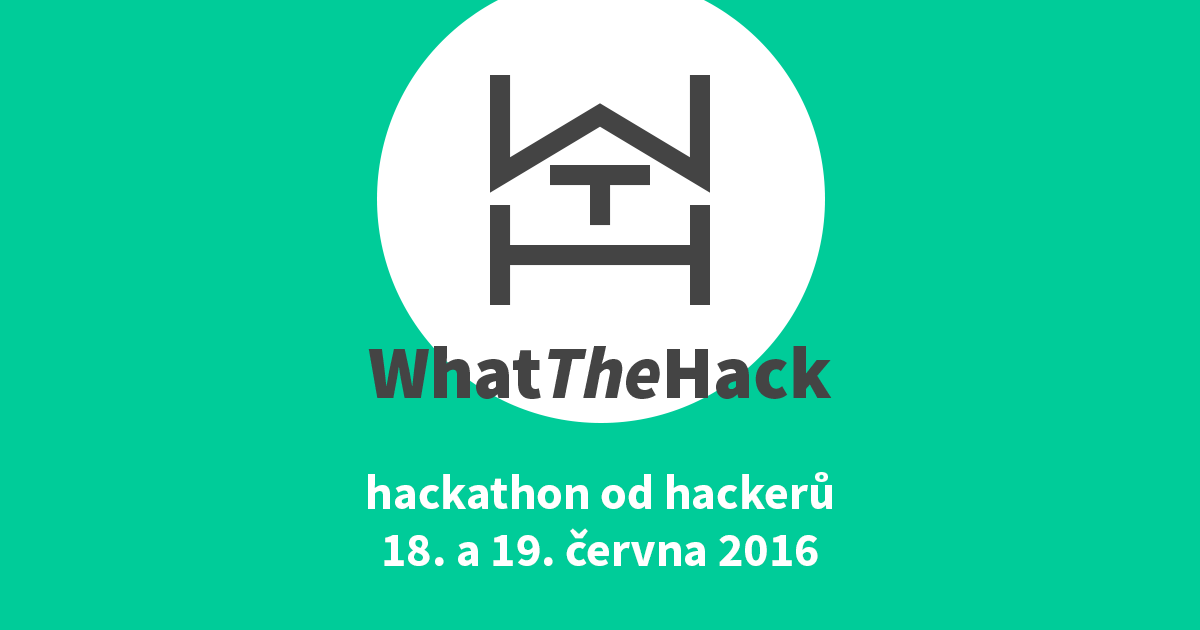
<style>
.page{position:relative;width:1200px;height:630px;background:#00cc99}
.page>*{position:absolute;margin:0}
.t1{font:75px "SourceSansPro-Black";color:#444444}
.t2{font:75px "SourceSansPro-BlackIt";color:#444444}
.t3{font:48px "SourceSansPro-Bold";color:#ffffff}
</style>
<div class="page">
<p class="t1" style="left:368px;top:346px;width:464px;height:53px">What<span class="t2">The</span>Hack</p>
<p class="t3" style="left:368px;top:472px;width:464px;height:94px;text-align:center">hackathon od hackerů<br>18. a 19. června 2016</p>
</div>
